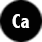
<style>
.page{position:relative;width:42px;height:42px;background:#020202}
.page>*{position:absolute;margin:0}
.t1{font:20px "AbadiMT-CondensedExtraBold";color:#ffffff}
</style>
<div class="page">
<p class="t1" style="left:12px;top:14px;width:18px;height:14px">Ca</p>
</div>
